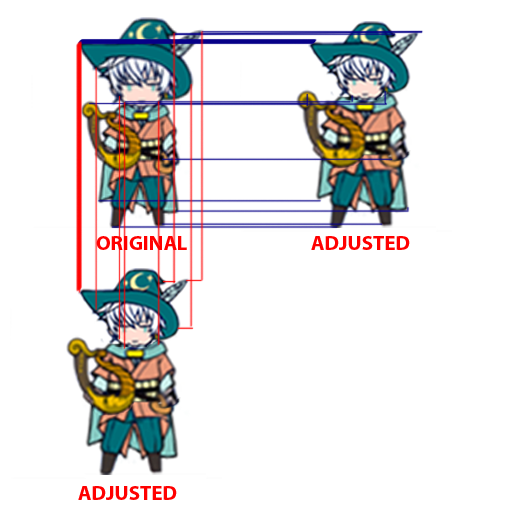
<style>
.page{position:relative;width:512px;height:512px;background:#ffffff}
.page>*{position:absolute;margin:0}
.t1{font:20.8px "MyriadPro-Bold";color:#ff0000}
</style>
<div class="page">
<p class="t1" style="left:96px;top:236px;width:91px;height:14px">ORIGINAL</p>
<p class="t1" style="left:311px;top:236px;width:99px;height:14px">ADJUSTED</p>
<p class="t1" style="left:78px;top:486px;width:99px;height:14px">ADJUSTED</p>
</div>
